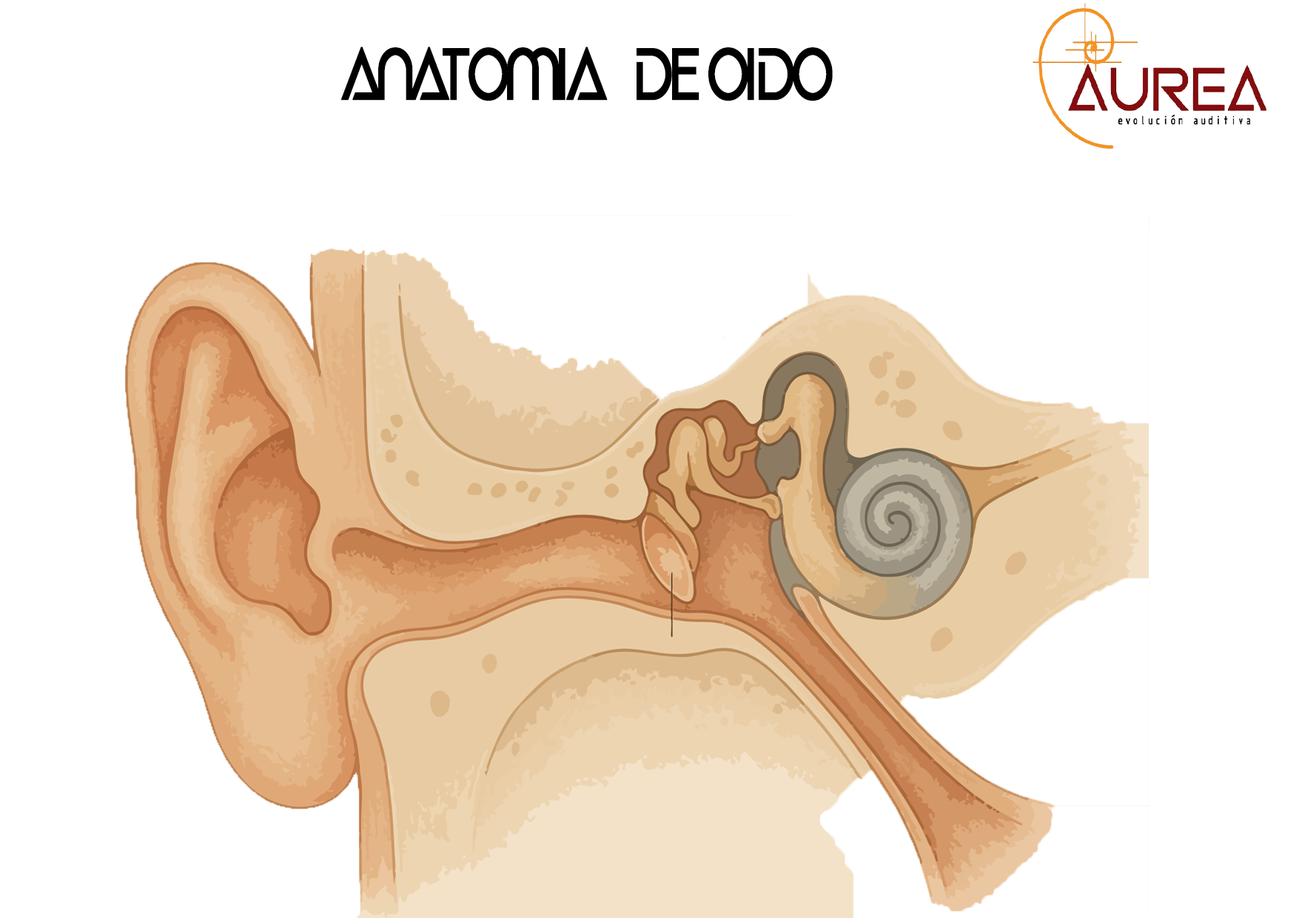
<style>
.page{position:relative;width:1299px;height:918px;background:#ffffff}
.page>*{position:absolute;margin:0}
.t1{font:68.9px "SlugBicolorBW00-Regular";letter-spacing:-0.005em;color:#000000;font-weight:bold;scale:0.73 1}
</style>
<div class="page">
<p class="t1" style="left:341px;top:47px;width:491px;height:54px">ANATOMIA   DE OIDO</p>
</div>
